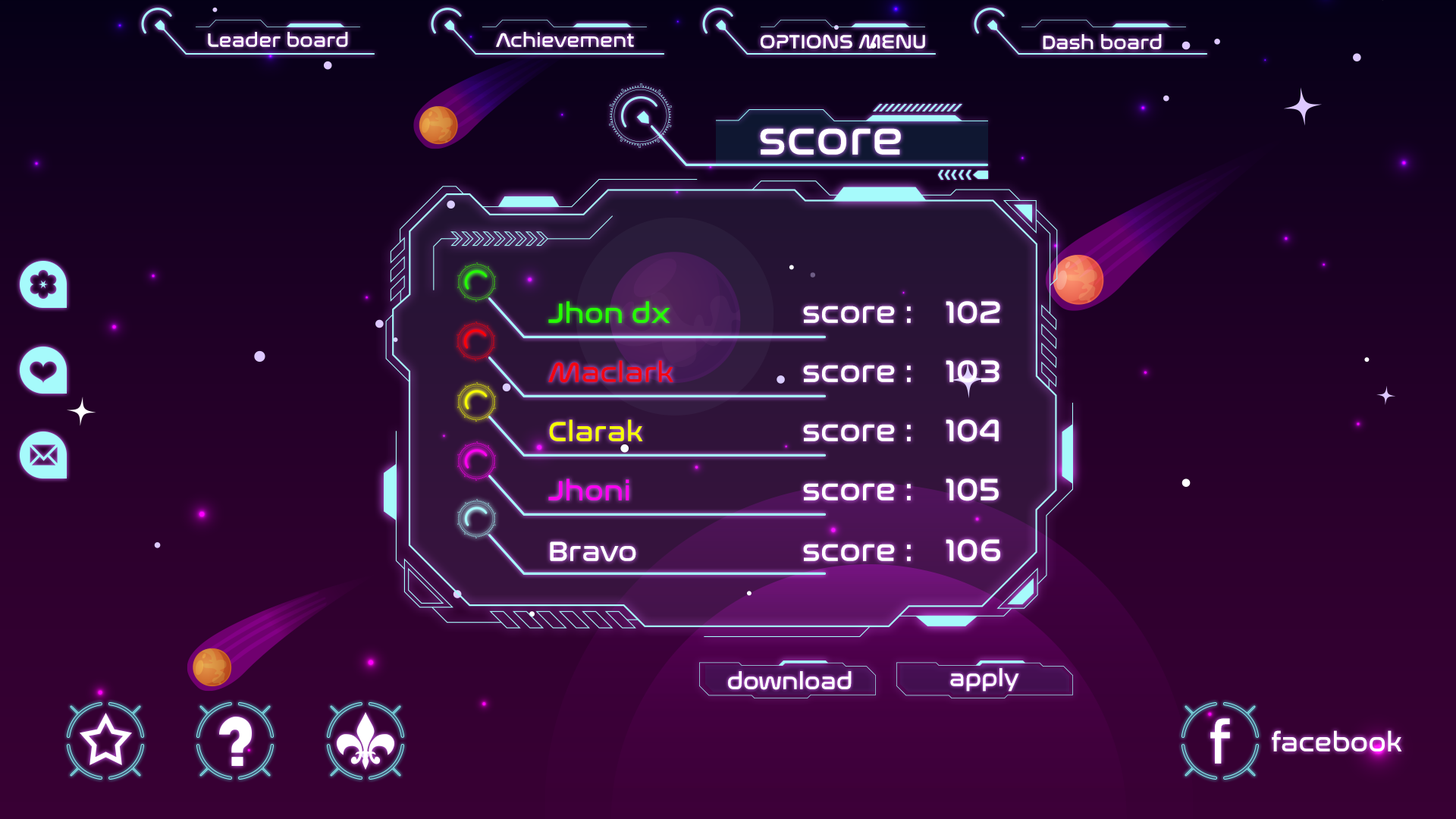
<style>
.page{position:relative;width:1456px;height:819px}
.page>*{position:absolute;margin:0}
.t1{font:19.7px "NasalizationRg-Regular";color:#ffffff}
.t2{font:49px "NasalizationRg-Regular";color:#ffffff}
.t3{font:28.4px "NasalizationRg-Regular";color:#24ff00}
.t4{font:31.6px "NasalizationRg-Regular";color:#ffffff}
.t5{font:28.4px "NasalizationRg-Regular";color:#f10612}
.t6{font:28.4px "NasalizationRg-Regular";color:#f6ff00}
.t7{font:28.4px "NasalizationRg-Regular";color:#ff00f0}
.t8{font:28.4px "NasalizationRg-Regular";color:#ffffff}
.t9{font:23.7px "NasalizationRg-Regular";color:#ffffff}
.t10{font:59.2px "NasalizationRg-Regular";color:#ffffff}
.t11{font:26.6px "NasalizationRg-Regular";color:#ffffff}
</style>
<div class="page">
<p class="t1" style="left:208px;top:32px;width:140px;height:15px">Leader board</p>
<p class="t1" style="left:496px;top:32px;width:138px;height:16px">Achievement</p>
<p class="t1" style="left:761px;top:34px;width:164px;height:15px">OPTIONS MENU</p>
<p class="t1" style="left:1043px;top:34px;width:119px;height:15px">Dash board</p>
<p class="t2" style="left:760px;top:128px;width:141px;height:27px">score</p>
<p class="t3" style="left:548px;top:301px;width:122px;height:22px">Jhon dx</p>
<p class="t4" style="left:803px;top:306px;width:108px;height:17px">score :</p>
<p class="t4" style="left:946px;top:301px;width:54px;height:23px">102</p>
<p class="t5" style="left:548px;top:360px;width:125px;height:23px">Maclark</p>
<p class="t4" style="left:803px;top:365px;width:108px;height:17px">score :</p>
<p class="t4" style="left:946px;top:360px;width:53px;height:23px">103</p>
<p class="t6" style="left:549px;top:419px;width:94px;height:22px">Clarak</p>
<p class="t4" style="left:803px;top:424px;width:108px;height:17px">score :</p>
<p class="t4" style="left:946px;top:419px;width:53px;height:23px">104</p>
<p class="t7" style="left:548px;top:479px;width:81px;height:21px">Jhoni</p>
<p class="t4" style="left:803px;top:483px;width:108px;height:17px">score :</p>
<p class="t4" style="left:946px;top:479px;width:53px;height:22px">105</p>
<p class="t8" style="left:550px;top:541px;width:86px;height:21px">Bravo</p>
<p class="t4" style="left:803px;top:544px;width:108px;height:17px">score :</p>
<p class="t4" style="left:946px;top:539px;width:54px;height:23px">106</p>
<p class="t9" style="left:728px;top:671px;width:124px;height:19px">download</p>
<p class="t9" style="left:950px;top:668px;width:69px;height:24px">apply</p>
<p class="t10" style="left:1210px;top:718px;width:20px;height:46px">f</p>
<p class="t11" style="left:1272px;top:730px;width:130px;height:21px">facebook</p>
</div>
